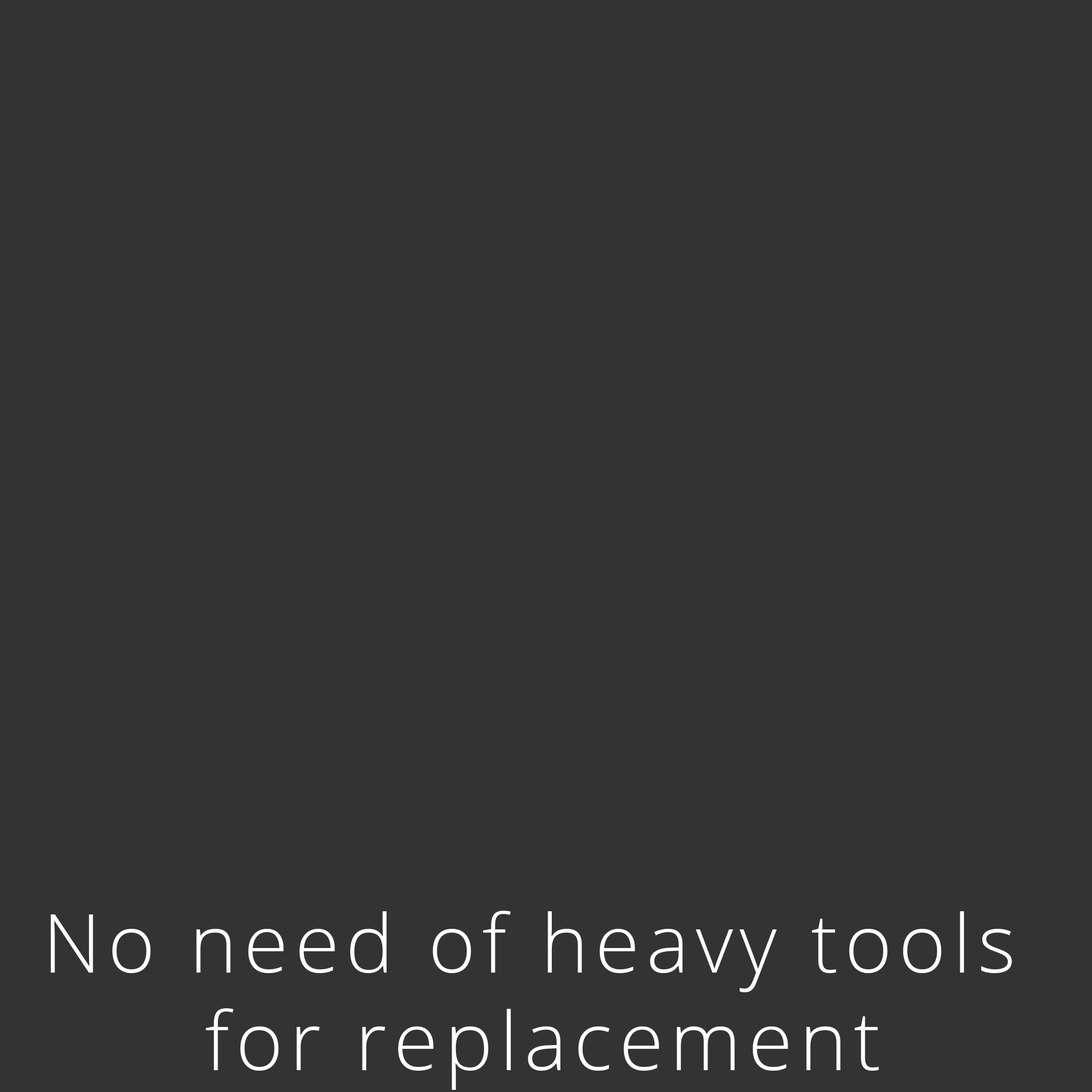
<style>
.page{position:relative;width:1092px;height:1092px;background:#333333}
.page>*{position:absolute;margin:0}
.t1{font:81.2px "OpenSans-Light";letter-spacing:0.08em;color:#ffffff}
</style>
<div class="page">
<p class="t1" style="left:51px;top:911px;width:961px;height:179px;text-align:center">No need of heavy tools <br>for replacement</p>
</div>
